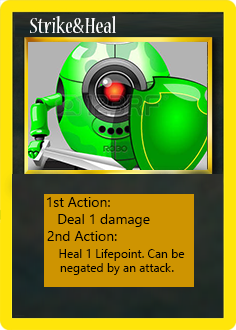
<style>
.page{position:relative;width:236px;height:330px}
.page>*{position:absolute;margin:0}
.t1{font:24px "NuevaStd-Cond";color:#ffffff}
.t2{font:14px "LeelawadeeUI";color:#000000}
.t3{font:12px "LeelawadeeUI";color:#000000}
</style>
<div class="page">
<p class="t1" style="left:30px;top:16px;width:86px;height:17px">Strike&amp;Heal</p>
<p class="t2" style="left:47px;top:197px;width:103px;height:30px">1st Action:<br>   Deal 1 damage</p>
<p class="t3" style="left:47px;top:231px;width:138px;height:44px"><span class="t2">2nd Action:<br>   </span>Heal 1 Lifepoint. Can be <br>    negated by an attack.</p>
</div>
